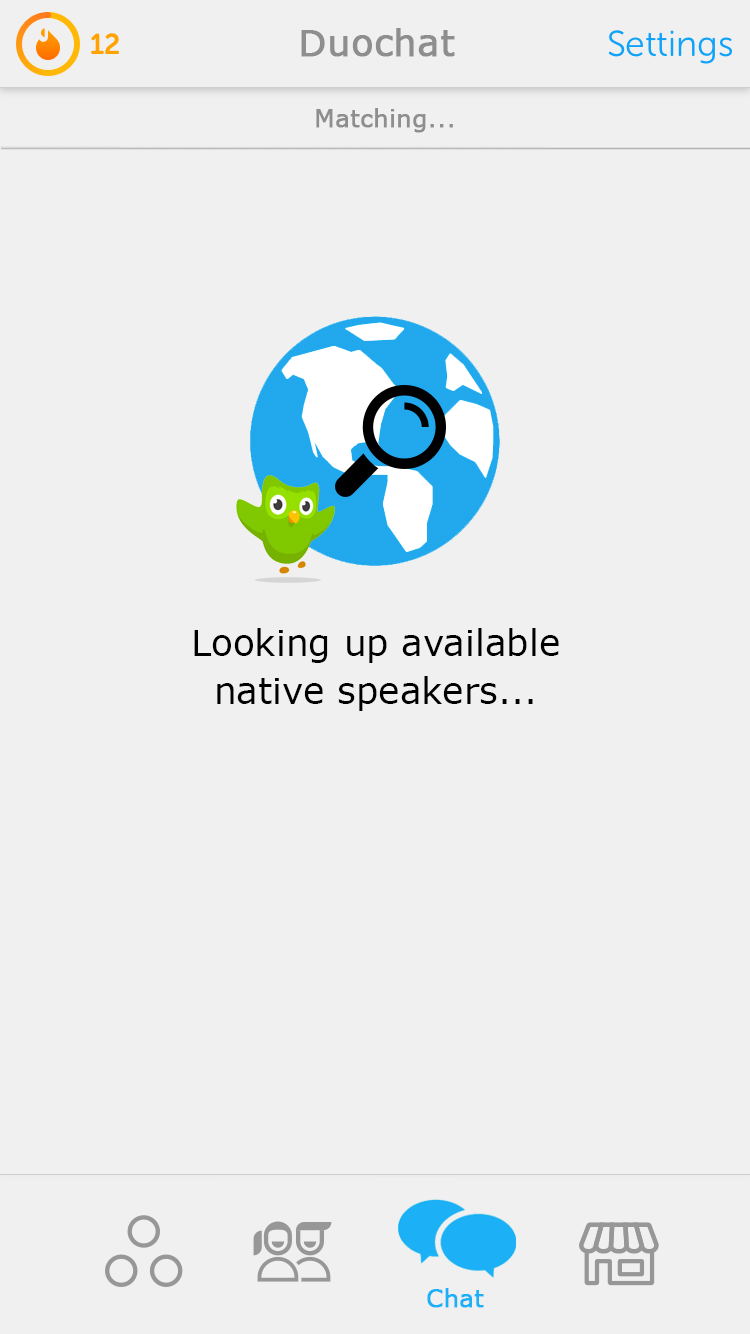
<style>
.page{position:relative;width:750px;height:1334px;background:#f0f0f0}
.page>*{position:absolute;margin:0}
.t1{font:36px "MSReferenceSansSerif";color:#8e8e8e;font-weight:bold}
.t2{font:24px "MSReferenceSansSerif";color:#8e8e8e;font-weight:bold}
.t3{font:36px/48px "MSReferenceSansSerif";color:#000000}
.t4{font:24px "MSReferenceSansSerif";color:#1cb0f6;font-weight:bold}
</style>
<div class="page">
<p class="t1" style="left:301px;top:28px;width:154px;height:29px">Duochat</p>
<p class="t2" style="left:316px;top:108px;width:137px;height:25px">Matching...</p>
<p class="t3" style="left:194px;top:628px;width:365px;height:83px;text-align:center">Looking up available<br>native speakers...</p>
<p class="t4" style="left:427px;top:1288px;width:57px;height:20px">Chat</p>
</div>
